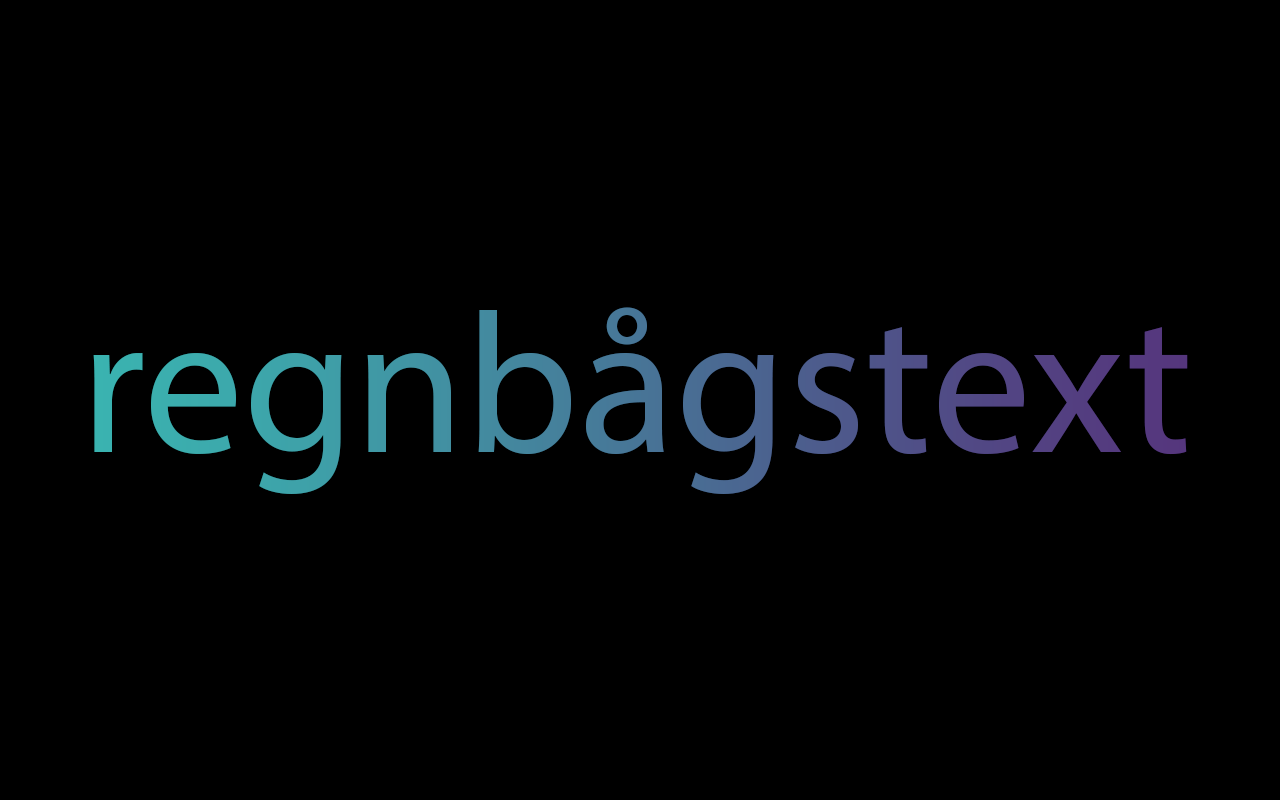
<style>
.page{position:relative;width:1280px;height:800px;background:#000000}
.page>*{position:absolute;margin:0}
.t1{font:200px "MyriadPro-Regular"}
</style>
<div class="page">
<p class="t1" style="left:93px;top:307px;width:1095px;height:187px">regnbågstext</p>
</div>
